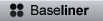
<style>
.page{position:relative;width:103px;height:21px}
.page>*{position:absolute;margin:0}
.t1{font:14px "Arial-BoldMT";letter-spacing:-0.025em;color:#000000}
.t2{font:14px "ArialMT";letter-spacing:-0.025em;color:#000000}
</style>
<div class="page">
<p class="t1" style="left:31px;top:5px;width:58px;height:11px"><span class="t2">Base</span>liner</p>
</div>
